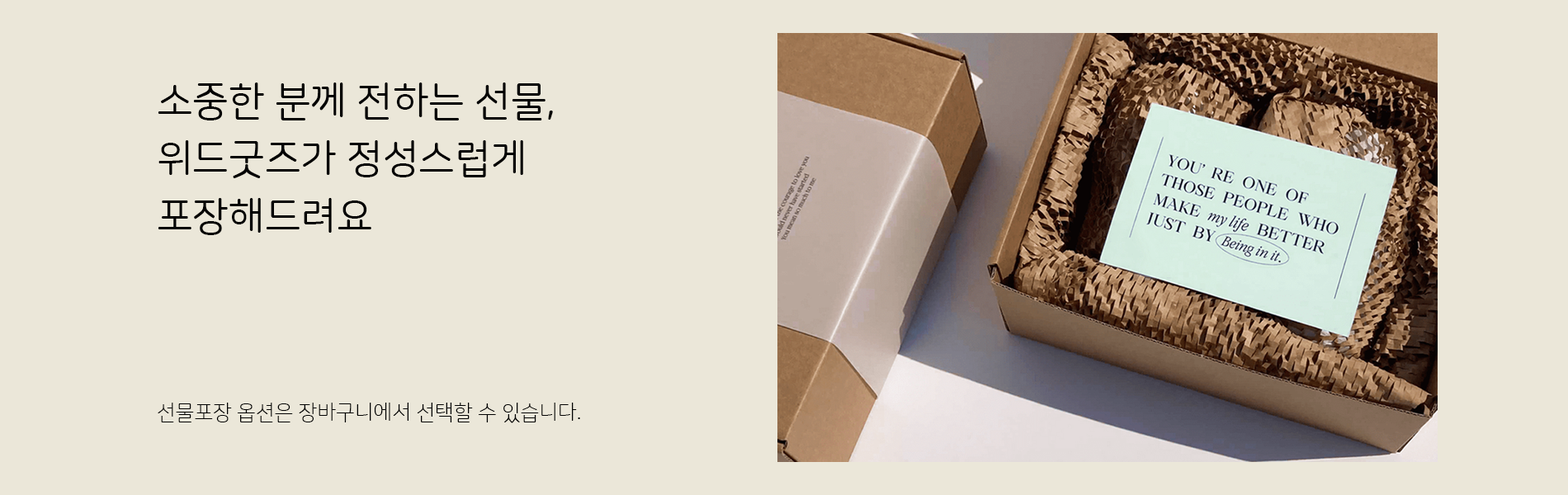
<style>
.page{position:relative;width:1568px;height:495px;background:#ebe7d9}
.page>*{position:absolute;margin:0}
.t1{font:39.6px/57.8px "NanumSquareRoundR";color:#010101}
.t2{font:20.6px "NanumSquareRoundL";color:#000000}
</style>
<div class="page">
<p class="t1" style="left:158px;top:83px;width:395px;height:152px">소중한 분께 전하는 선물,<br>위드굿즈가 정성스럽게<br>포장해드려요</p>
<p class="t2" style="left:158px;top:403px;width:422px;height:20px">선물포장 옵션은 장바구니에서 선택할 수 있습니다.</p>
</div>
